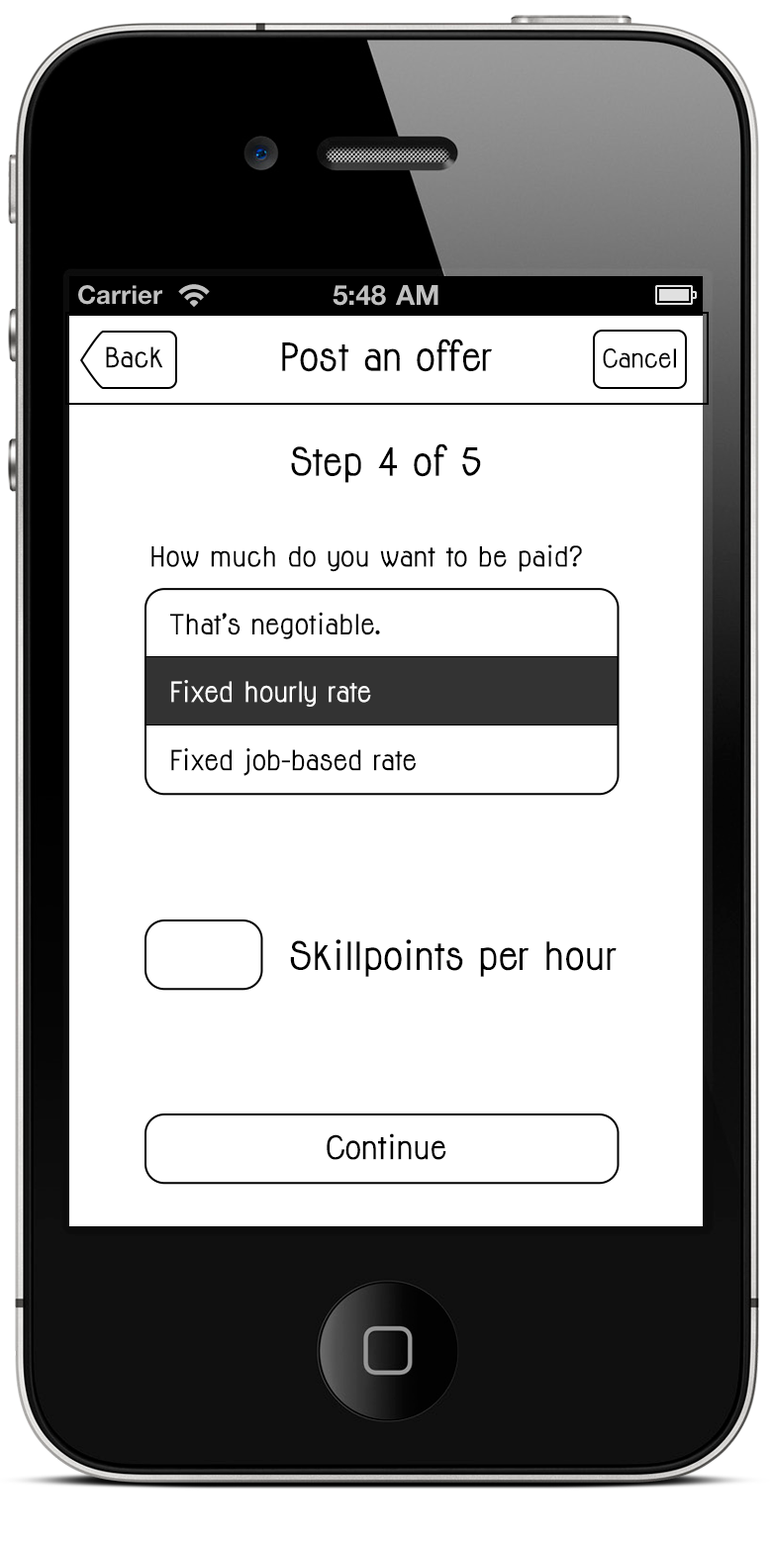
<style>
.page{position:relative;width:772px;height:1545px;background:#ffffff}
.page>*{position:absolute;margin:0}
.t1{font:35.6px "Jolly-Bold";color:#000000}
.t2{font:25.7px "Jolly-Bold";color:#000000}
.t3{font:23.8px "Jolly-Bold";color:#000000}
.t4{font:25.5px "Jolly-Bold";color:#000000}
.t5{font:25.7px "Jolly-Bold";color:#ffffff}
.t6{font:29.8px "Jolly-Bold";color:#000000}
</style>
<div class="page">
<p class="t1" style="left:282px;top:338px;width:210px;height:34px">Post an offer</p>
<p class="t2" style="left:106px;top:346px;width:57px;height:22px">Back</p>
<p class="t3" style="left:603px;top:348px;width:73px;height:20px">Cancel</p>
<p class="t1" style="left:291px;top:443px;width:190px;height:40px">Step 4 of 5</p>
<p class="t4" style="left:151px;top:544px;width:431px;height:28px">How much do you want to be paid?</p>
<p class="t2" style="left:170px;top:612px;width:210px;height:27px">That’s negotiable.</p>
<p class="t5" style="left:171px;top:680px;width:200px;height:27px">Fixed hourly rate</p>
<p class="t2" style="left:171px;top:748px;width:245px;height:28px">Fixed job-based rate</p>
<p class="t1" style="left:290px;top:939px;width:327px;height:38px">Skillpoints per hour</p>
<p class="t6" style="left:327px;top:1133px;width:119px;height:27px">Continue</p>
</div>
